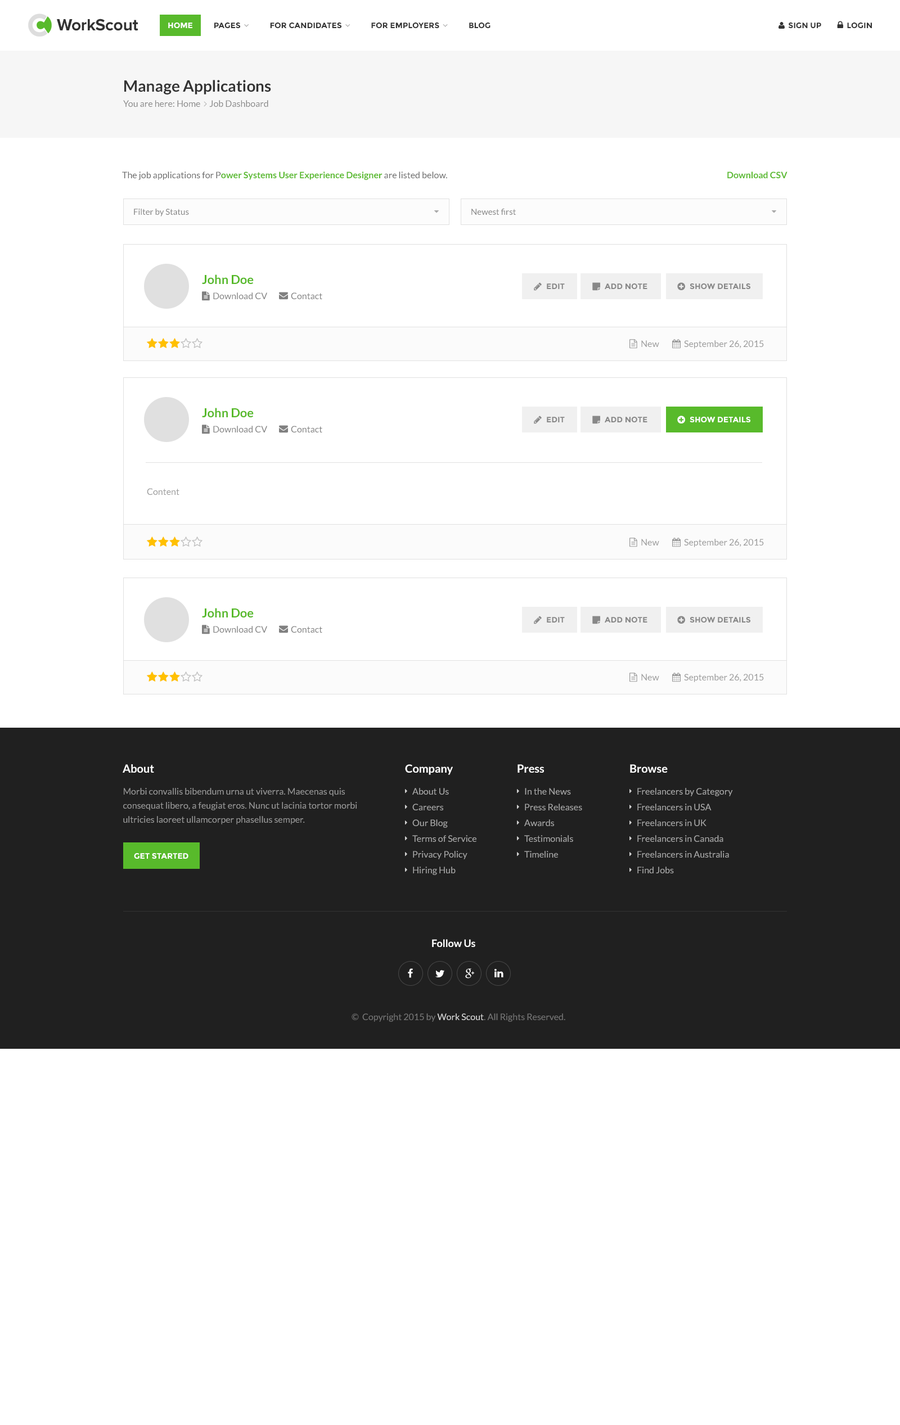
<style>
.page{position:relative;width:900px;height:1425px;background:#ffffff}
.page>*{position:absolute;margin:0}
.t1{font:16.9px "ProximaNova-Bold";letter-spacing:-0.015em;color:#323232}
.t2{font:9px "Lato-Bold";color:#58ba2b}
.t3{font:9px "Lato-Regular";color:#666666}
.t4{font:8.4px "Lato-Regular";color:#808080}
.t5{font:12.4px "Lato-Bold";color:#58ba2b}
.t6{font:9px "Lato-Regular";color:#808080}
.t7{font:7.9px "Montserrat-Bold";color:#888888;text-transform:uppercase}
.t8{font:9px "Lato-Regular";color:#999999}
.t9{font:7.9px "Montserrat-Bold";color:#ffffff;text-transform:uppercase}
.t10{font:11.2px "Lato-Bold";color:#ffffff}
.t11{font:9px/14.1px "Lato-Regular";color:#999999}
.t12{font:9px/15.8px "Lato-Regular";color:#aaaaaa}
.t13{font:10.1px "Lato-Bold";color:#ffffff}
.t14{font:9px "Lato-Regular";color:#777777}
.t15{font:9px "Lato-Regular";color:#dddddd}
</style>
<div class="page">
<p class="t1" style="left:57px;top:19px;width:81px;height:12px">WorkScout</p>
<p class="t2" style="left:122px;top:172px;width:325px;height:8px"><span class="t3">The job applications for P</span>ower Systems User Experience Designer<span class="t3"> are listed below.</span></p>
<p class="t2" style="left:727px;top:172px;width:61px;height:6px">Download CSV</p>
<p class="t4" style="left:134px;top:209px;width:55px;height:8px">Filter by Status</p>
<p class="t4" style="left:471px;top:209px;width:45px;height:6px">Newest first</p>
<p class="t5" style="left:202px;top:274px;width:52px;height:10px">John Doe</p>
<p class="t6" style="left:213px;top:292px;width:54px;height:7px">Download CV</p>
<p class="t6" style="left:291px;top:292px;width:31px;height:8px">Contact</p>
<p class="t7" style="left:547px;top:284px;width:18px;height:5px">Edit</p>
<p class="t7" style="left:605px;top:284px;width:42px;height:5px">Add Note</p>
<p class="t7" style="left:690px;top:284px;width:60px;height:5px">Show Details</p>
<p class="t8" style="left:641px;top:340px;width:18px;height:7px">New</p>
<p class="t8" style="left:684px;top:340px;width:80px;height:9px">September 26, 2015</p>
<p class="t5" style="left:202px;top:408px;width:52px;height:9px">John Doe</p>
<p class="t6" style="left:213px;top:426px;width:54px;height:7px">Download CV</p>
<p class="t6" style="left:291px;top:426px;width:31px;height:7px">Contact</p>
<p class="t7" style="left:547px;top:417px;width:18px;height:5px">Edit</p>
<p class="t7" style="left:605px;top:417px;width:42px;height:5px">Add Note</p>
<p class="t9" style="left:690px;top:417px;width:60px;height:5px">Show Details</p>
<p class="t8" style="left:147px;top:488px;width:32px;height:8px">Content</p>
<p class="t8" style="left:641px;top:539px;width:18px;height:7px">New</p>
<p class="t8" style="left:684px;top:539px;width:80px;height:8px">September 26, 2015</p>
<p class="t5" style="left:202px;top:608px;width:52px;height:10px">John Doe</p>
<p class="t7" style="left:547px;top:617px;width:18px;height:6px">Edit</p>
<p class="t7" style="left:605px;top:617px;width:42px;height:6px">Add Note</p>
<p class="t7" style="left:690px;top:617px;width:60px;height:6px">Show Details</p>
<p class="t6" style="left:213px;top:626px;width:54px;height:7px">Download CV</p>
<p class="t6" style="left:291px;top:626px;width:31px;height:7px">Contact</p>
<p class="t8" style="left:641px;top:674px;width:18px;height:7px">New</p>
<p class="t8" style="left:684px;top:674px;width:80px;height:8px">September 26, 2015</p>
<p class="t10" style="left:123px;top:764px;width:31px;height:9px">About</p>
<p class="t10" style="left:405px;top:764px;width:48px;height:11px">Company</p>
<p class="t10" style="left:518px;top:764px;width:26px;height:9px">Press</p>
<p class="t10" style="left:630px;top:764px;width:38px;height:9px">Browse</p>
<p class="t11" style="left:123px;top:788px;width:234px;height:37px">Morbi convallis bibendum urna ut viverra. Maecenas quis <br>consequat libero, a feugiat eros. Nunc ut lacinia tortor morbi ultricies laoreet ullamcorper phasellus semper.</p>
<p class="t12" style="left:412px;top:788px;width:64px;height:87px">About Us<br>Careers<br>Our Blog<br>Terms of Service<br>Privacy Policy<br>Hiring Hub</p>
<p class="t12" style="left:524px;top:788px;width:58px;height:70px">In the News<br>Press Releases<br>Awards<br>Testimonials<br>Timeline</p>
<p class="t12" style="left:637px;top:788px;width:96px;height:86px">Freelancers by Category<br>Freelancers in USA<br>Freelancers in UK<br>Freelancers in Canada<br>Freelancers in Australia<br>Find Jobs</p>
<p class="t9" style="left:134px;top:853px;width:54px;height:6px">Get Started</p>
<p class="t13" style="left:432px;top:939px;width:43px;height:8px">Follow Us</p>
<p class="t14" style="left:352px;top:1014px;width:213px;height:8px">©  Copyright 2015 by <span class="t15">Work Scout</span>. All Rights Reserved.</p>
</div>
